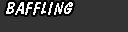
<style>
.page{position:relative;width:128px;height:32px;background:#333333}
.page>*{position:absolute;margin:0}
.t1{font:18px "DomDiagonalBT-Regular";letter-spacing:0.05em;color:#fbfbfb}
</style>
<div class="page">
<p class="t1" style="left:6px;top:2px;width:67px;height:13px">BAFFLING</p>
</div>
